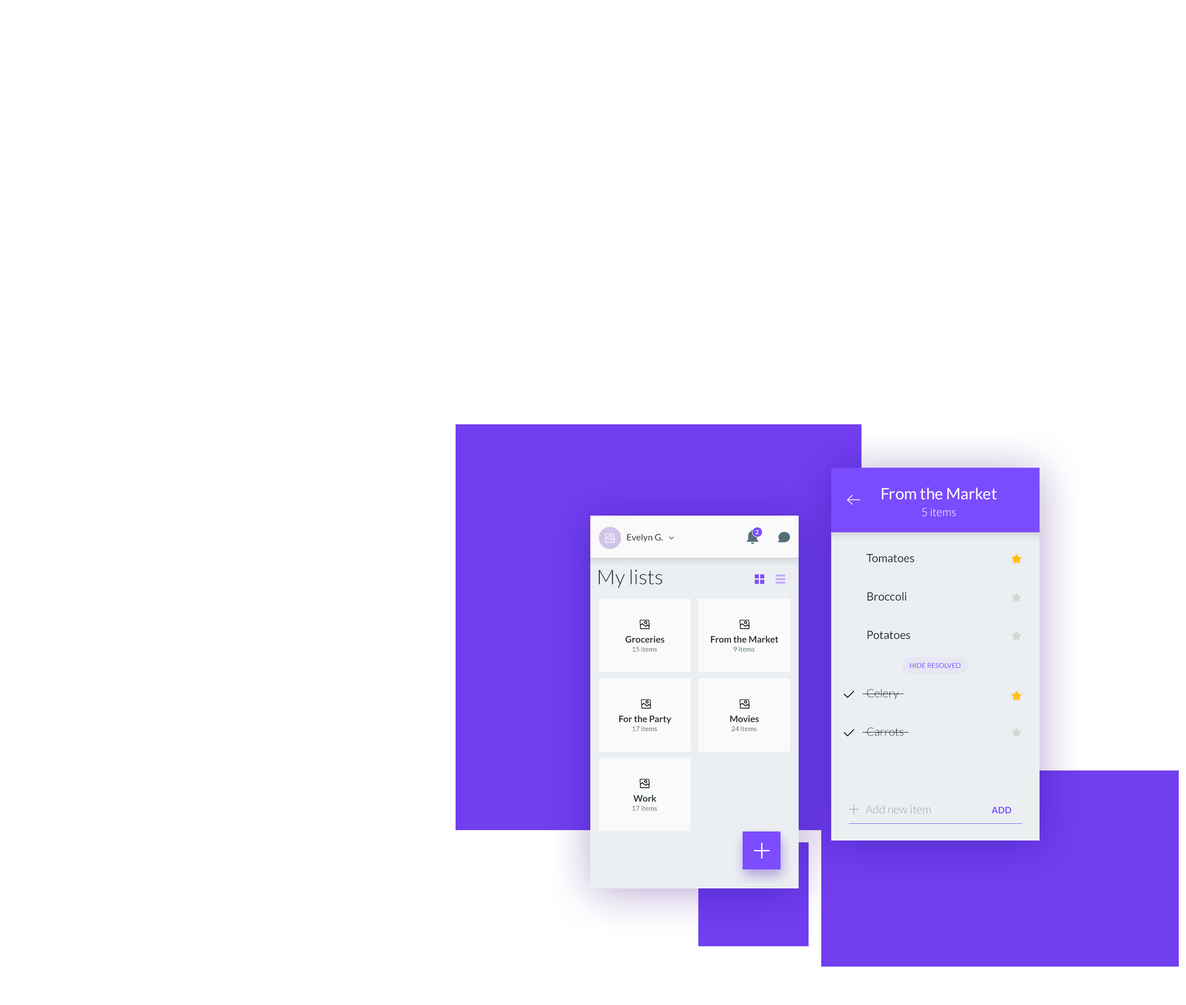
<style>
.page{position:relative;width:1186px;height:1005px;background:#ffffff}
.page>*{position:absolute;margin:0}
.t1{font:15.8px "Lato-Regular";color:#ffffff}
.t2{font:11.3px "Lato-Light";color:#ffffff}
.t3{font:9px "Lato-Regular";color:#263238}
.t4{font:5.7px "Lato-Bold";color:#ffffff}
.t5{font:11.3px/38.4px "Lato-Regular";color:#263238}
.t6{font:11.3px/19.9px "Lato-Light";color:#263238}
.t7{font:11.3px/38.4px "Lato-Light";color:#263238}
.t8{font:20.3px "Lato-Light";color:#263238}
.t9{font:9px "Lato-Bold";color:#263238}
.t10{font:6.8px "Lato-Regular";color:#546e7a}
.t11{font:6.8px "Lato-Regular";color:#7b4cfe;text-transform:uppercase}
.t12{font:11.3px "Lato-Light";color:#9e9e9e}
.t13{font:9px "Lato-Bold";color:#7b4cfe}
</style>
<div class="page">
<p class="t1" style="left:882px;top:488px;width:115px;height:12px">From the Market</p>
<p class="t2" style="left:922px;top:508px;width:34px;height:9px">5 items</p>
<p class="t3" style="left:627px;top:534px;width:36px;height:8px">Evelyn G.</p>
<p class="t4" style="left:755px;top:530px;width:4px;height:4px">2</p>
<p class="t5" style="left:867px;top:554px;width:47px;height:182px">Tomatoes<br>Broccoli<br>Potatoes<br><br><span class="t6">Celery<br></span><span class="t7">Carrots</span></p>
<p class="t8" style="left:598px;top:570px;width:64px;height:18px">My lists</p>
<p class="t9" style="left:625px;top:636px;width:39px;height:7px">Groceries</p>
<p class="t9" style="left:711px;top:636px;width:67px;height:7px">From the Market</p>
<p class="t10" style="left:632px;top:647px;width:25px;height:5px">15 items</p>
<p class="t10" style="left:734px;top:647px;width:21px;height:5px">9 items</p>
<p class="t11" style="left:910px;top:663px;width:51px;height:5px">hide resolved</p>
<p class="t9" style="left:619px;top:716px;width:52px;height:8px">For the Party</p>
<p class="t9" style="left:730px;top:716px;width:29px;height:6px">Movies</p>
<p class="t10" style="left:632px;top:726px;width:25px;height:5px">17 items</p>
<p class="t10" style="left:731px;top:726px;width:26px;height:5px">24 items</p>
<p class="t9" style="left:633px;top:795px;width:23px;height:7px">Work</p>
<p class="t10" style="left:632px;top:806px;width:25px;height:5px">17 items</p>
<p class="t12" style="left:866px;top:805px;width:65px;height:9px">Add new item</p>
<p class="t13" style="left:991px;top:807px;width:21px;height:7px">ADD</p>
</div>
